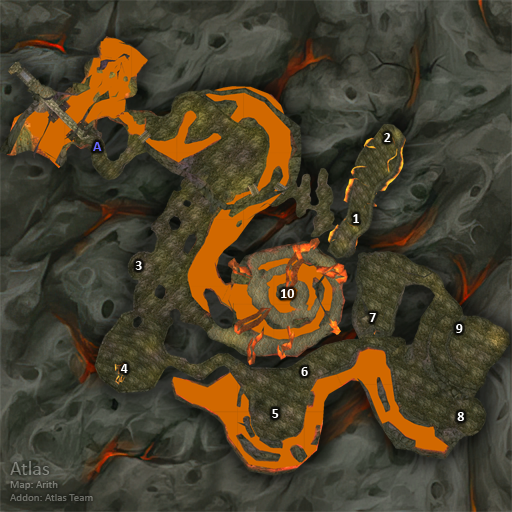
<style>
.page{position:relative;width:512px;height:512px}
.page>*{position:absolute;margin:0}
.t1{font:14px "Calibri-Bold";color:#ffffff}
.t2{font:14px "Calibri-Bold";color:#6666ff}
</style>
<div class="page">
<p class="t1" style="left:384px;top:133px;width:7px;height:9px">2</p>
<p class="t2" style="left:93px;top:142px;width:9px;height:9px">A</p>
<p class="t1" style="left:353px;top:214px;width:6px;height:9px">1</p>
<p class="t1" style="left:135px;top:261px;width:7px;height:9px">3</p>
<p class="t1" style="left:281px;top:289px;width:14px;height:9px">10</p>
<p class="t1" style="left:369px;top:313px;width:7px;height:9px">7</p>
<p class="t1" style="left:456px;top:324px;width:7px;height:9px">9</p>
<p class="t1" style="left:120px;top:364px;width:8px;height:9px">4</p>
<p class="t1" style="left:301px;top:367px;width:7px;height:9px">6</p>
<p class="t1" style="left:272px;top:409px;width:7px;height:9px">5</p>
<p class="t1" style="left:457px;top:412px;width:7px;height:9px">8</p>
</div>
